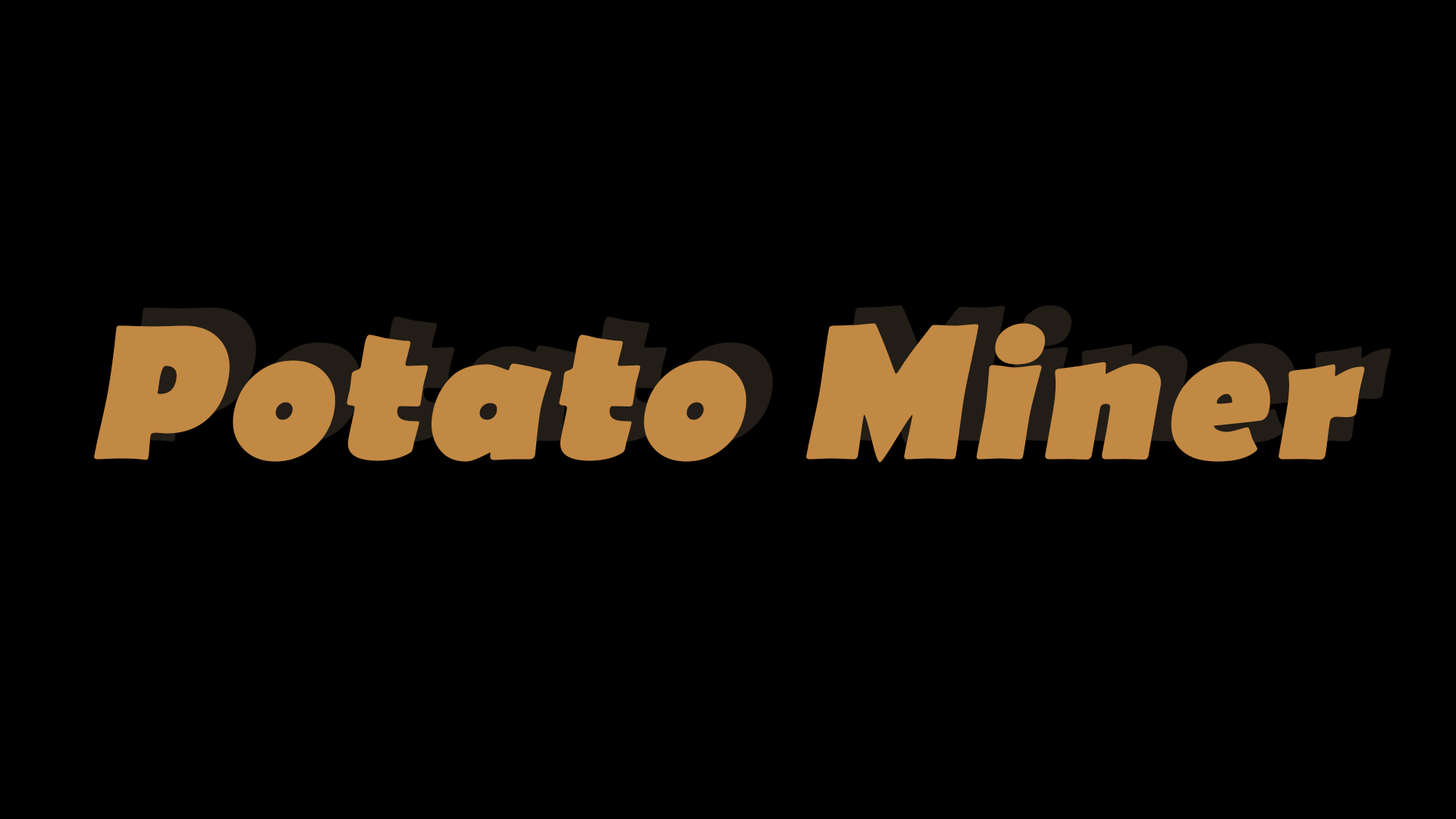
<style>
.page{position:relative;width:1456px;height:819px;background:#000000}
.page>*{position:absolute;margin:0}
.t1{font:193px "BerlinSansFB-Bold";font-weight:bold;font-style:italic}
.t2{font:193px "BerlinSansFB-Bold";color:#c28944;font-weight:bold;font-style:italic}
</style>
<div class="page">
<p class="t1" style="left:121px;top:305px;width:1271px;height:139px">Potato Miner</p>
<p class="t2" style="left:94px;top:323px;width:1271px;height:140px">Potato Miner</p>
</div>
